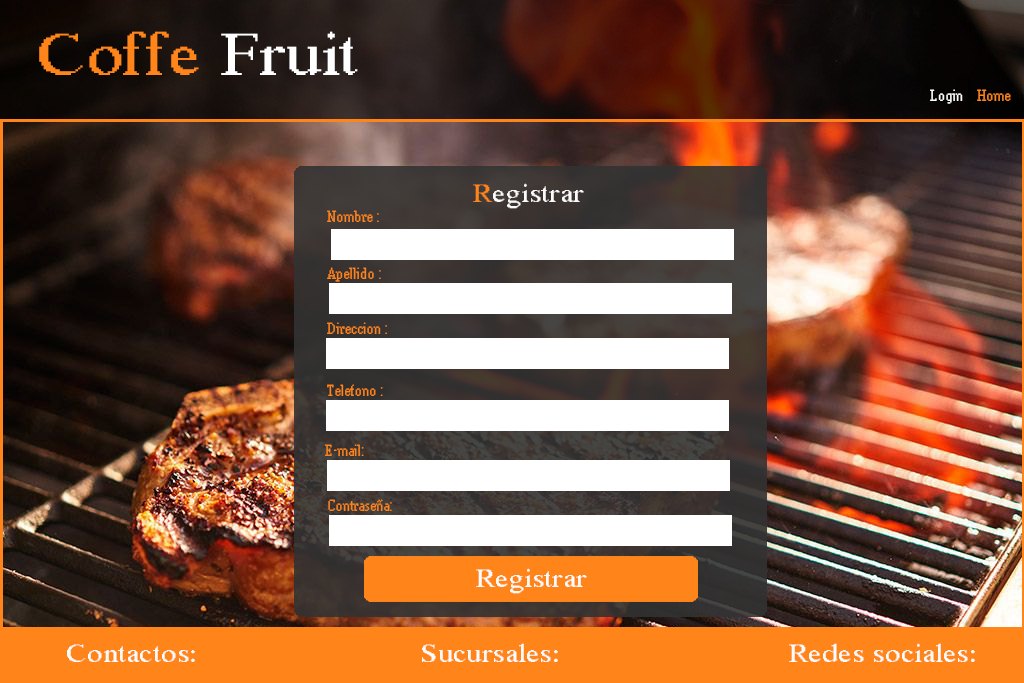
<style>
.page{position:relative;width:1024px;height:683px}
.page>*{position:absolute;margin:0}
.t1{font:60px "MS Serif";color:#ff851b;scale:1.21 1}
.t2{font:60px "MS Serif";color:#ffffff;scale:1.21 1}
.t3{font:14px "MS Serif";color:#ffffff}
.t4{font:14px "MS Serif";color:#ff851b}
.t5{font:25.4px "MS Serif";color:#fbfbfb;scale:1.21 1}
.t6{font:25.4px "MS Serif";color:#ff851b;scale:1.21 1}
</style>
<div class="page">
<p class="t1" style="left:39px;top:31px;width:319px;height:44px">Coffe <span class="t2">Fruit</span></p>
<p class="t3" style="left:930px;top:89px;width:33px;height:15px">Login</p>
<p class="t4" style="left:977px;top:89px;width:34px;height:12px">Home</p>
<p class="t5" style="left:473px;top:183px;width:111px;height:26px"><span class="t6">R</span>egistrar</p>
<p class="t4" style="left:327px;top:210px;width:52px;height:12px">Nombre :</p>
<p class="t4" style="left:327px;top:267px;width:54px;height:15px">Apellido :</p>
<p class="t4" style="left:327px;top:322px;width:60px;height:12px">Direccion :</p>
<p class="t4" style="left:327px;top:384px;width:56px;height:12px">Telefono :</p>
<p class="t4" style="left:325px;top:444px;width:39px;height:12px">E-mail:</p>
<p class="t4" style="left:328px;top:499px;width:64px;height:12px">Contraseña:</p>
<p class="t5" style="left:476px;top:568px;width:111px;height:26px">Registrar</p>
<p class="t5" style="left:67px;top:644px;width:128px;height:18px">Contactos:</p>
<p class="t5" style="left:422px;top:643px;width:136px;height:19px">Sucursales:</p>
<p class="t5" style="left:789px;top:643px;width:186px;height:19px">Redes sociales:</p>
</div>
